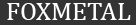
<style>
.page{position:relative;width:136px;height:25px;background:#333333}
.page>*{position:absolute;margin:0}
.t1{font:26px "CambriaMath";color:#ffffff}
</style>
<div class="page">
<p class="t1" style="left:7px;top:3px;width:124px;height:17px">FOXMETAL</p>
</div>
